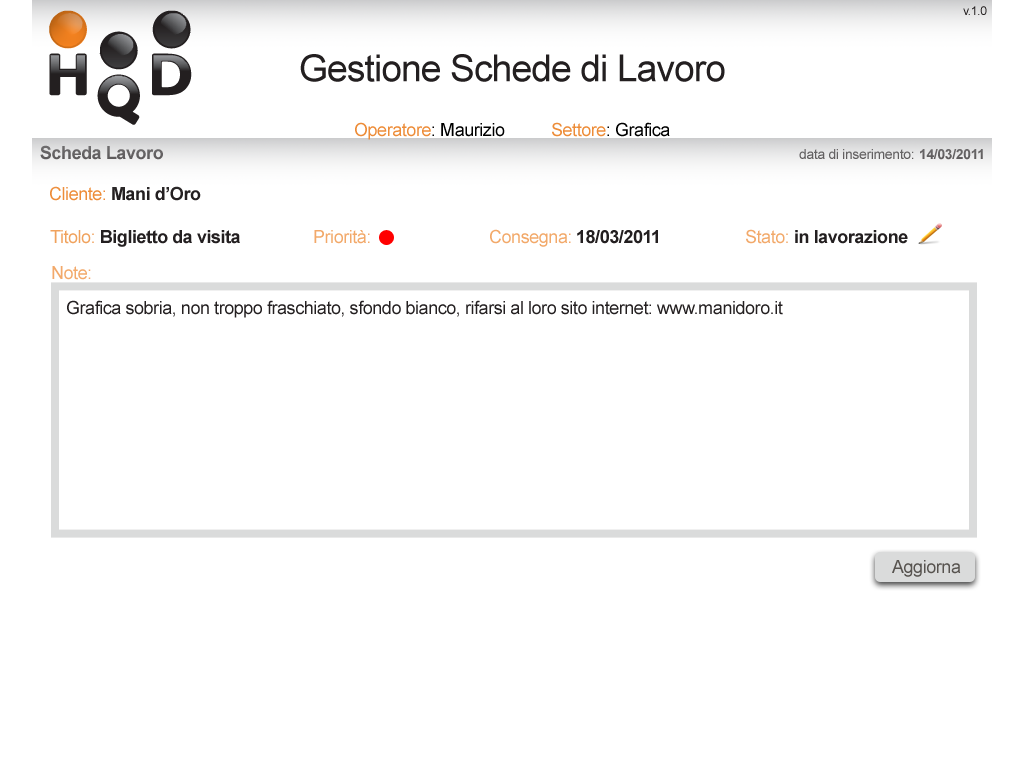
<style>
.page{position:relative;width:1024px;height:768px;background:#ffffff}
.page>*{position:absolute;margin:0}
.t1{font:12px "ArialMT";letter-spacing:-0.025em;color:#231f20}
.t2{font:37.2px "ArialMT";letter-spacing:-0.025em;color:#231f20}
.t3{font:18px "ArialMT";letter-spacing:-0.025em;color:#000000}
.t4{font:18px "ArialMT";letter-spacing:-0.025em;color:#ed8c38}
.t5{font:18px "Arial-BoldMT";letter-spacing:-0.025em;color:#646163}
.t6{font:14px "ArialMT";letter-spacing:-0.025em;color:#636061}
.t7{font:14px "Arial-BoldMT";letter-spacing:-0.025em;color:#646162}
.t8{font:18px "Arial-BoldMT";letter-spacing:-0.025em;color:#231f20}
.t9{font:18px "ArialMT";letter-spacing:-0.025em;color:#f0a25d}
.t10{font:18px "ArialMT";letter-spacing:-0.025em;color:#f2a96a}
.t11{font:18px "ArialMT";letter-spacing:-0.025em;color:#242021}
.t12{font:18px "ArialMT";letter-spacing:-0.025em;color:#57534f}
</style>
<div class="page">
<p class="t1" style="left:963px;top:6px;width:24px;height:9px">v.1.0</p>
<p class="t2" style="left:300px;top:54px;width:425px;height:28px">Gestione Schede di Lavoro</p>
<p class="t3" style="left:355px;top:122px;width:150px;height:18px"><span class="t4">Operatore</span>: Maurizio</p>
<p class="t3" style="left:552px;top:122px;width:118px;height:15px"><span class="t4">Settore</span>: Grafica</p>
<p class="t5" style="left:40px;top:145px;width:123px;height:15px">Scheda Lavoro</p>
<p class="t6" style="left:799px;top:149px;width:115px;height:10px">data di inserimento:</p>
<p class="t7" style="left:920px;top:149px;width:63px;height:11px">14/03/2011</p>
<p class="t8" style="left:50px;top:186px;width:151px;height:15px"><span class="t4">Cliente:</span> Mani d’Oro</p>
<p class="t8" style="left:50px;top:230px;width:190px;height:17px"><span class="t9">Titolo:</span> Biglietto da visita</p>
<p class="t10" style="left:314px;top:230px;width:56px;height:14px">Priorità:</p>
<p class="t10" style="left:490px;top:229px;width:81px;height:18px">Consegna:</p>
<p class="t8" style="left:577px;top:230px;width:81px;height:14px">18/03/2011</p>
<p class="t10" style="left:746px;top:229px;width:42px;height:15px">Stato:</p>
<p class="t8" style="left:795px;top:230px;width:113px;height:14px">in lavorazione</p>
<p class="t10" style="left:52px;top:266px;width:39px;height:14px">Note:</p>
<p class="t11" style="left:67px;top:300px;width:716px;height:18px">Grafica sobria, non troppo fraschiato, sfondo bianco, rifarsi al loro sito internet: www.manidoro.it</p>
<p class="t12" style="left:892px;top:560px;width:69px;height:17px">Aggiorna</p>
</div>
